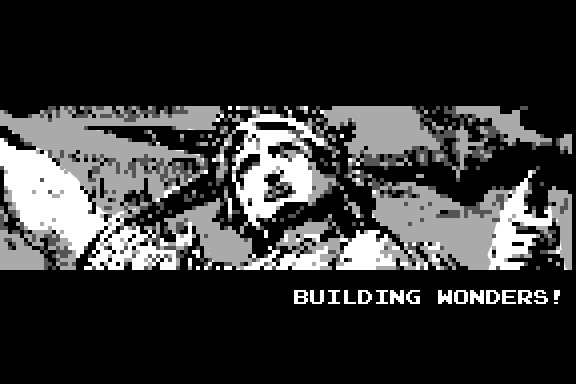
<style>
.page{position:relative;width:576px;height:384px;background:#000000}
.page>*{position:absolute;margin:0}
.t1{font:16px "PressStart2P";color:#ffffff}
</style>
<div class="page">
<p class="t1" style="left:294px;top:290px;width:266px;height:14px">BUILDING WONDERS!</p>
</div>
